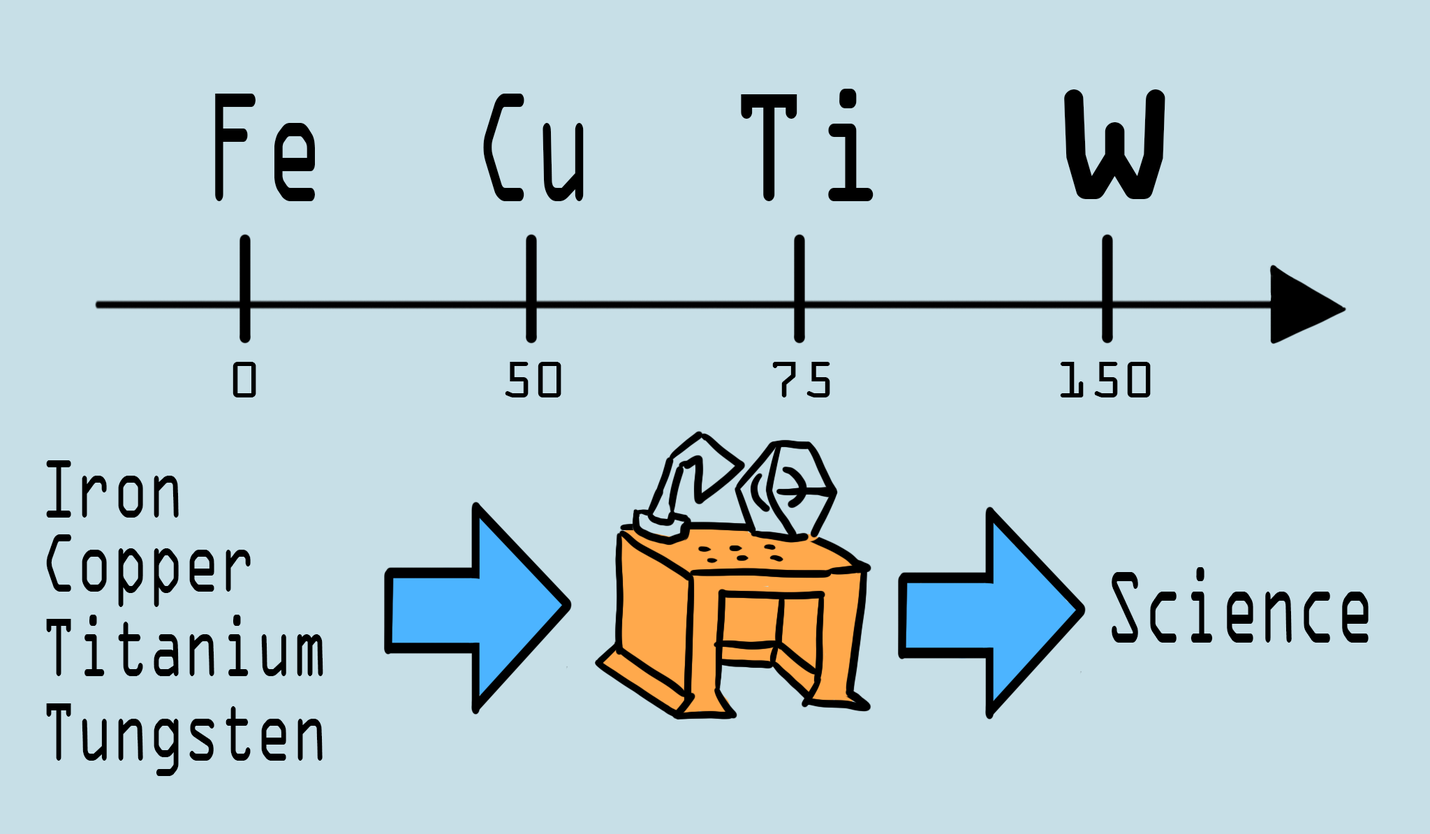
<style>
.page{position:relative;width:1430px;height:834px;background:#c7dfe7}
.page>*{position:absolute;margin:0}
.t1{font:164.6px "OCRAExtended";color:#000000;scale:0.82 1}
.t2{font:233.5px "OCRAExtended";color:#000000}
.t3{font:165.7px "OCRAExtended";color:#000000;scale:0.59 1}
.t4{font:55.2px "OCRAExtended";color:#000000}
.t5{font:88.5px "OCRAExtended";color:#000000;scale:0.67 1}
.t6{font:108px "OCRAExtended";color:#000000;scale:0.59 1}
</style>
<div class="page">
<p class="t1" style="left:741px;top:89px;width:133px;height:112px">Ti</p>
<p class="t2" style="left:1064px;top:89px;width:101px;height:110px">w</p>
<p class="t3" style="left:215px;top:94px;width:100px;height:107px">Fe</p>
<p class="t3" style="left:483px;top:94px;width:101px;height:107px">Cu</p>
<p class="t4" style="left:233px;top:362px;width:23px;height:35px">0</p>
<p class="t4" style="left:505px;top:362px;width:56px;height:35px">50</p>
<p class="t4" style="left:772px;top:362px;width:58px;height:35px">75</p>
<p class="t4" style="left:1060px;top:362px;width:91px;height:35px">150</p>
<p class="t5" style="left:46px;top:460px;width:133px;height:57px">Iron</p>
<p class="t5" style="left:46px;top:534px;width:205px;height:73px">Copper</p>
<p class="t6" style="left:1112px;top:567px;width:257px;height:75px">Science</p>
<p class="t5" style="left:46px;top:615px;width:277px;height:61px">Titanium</p>
<p class="t5" style="left:46px;top:703px;width:277px;height:73px">Tungsten</p>
</div>
